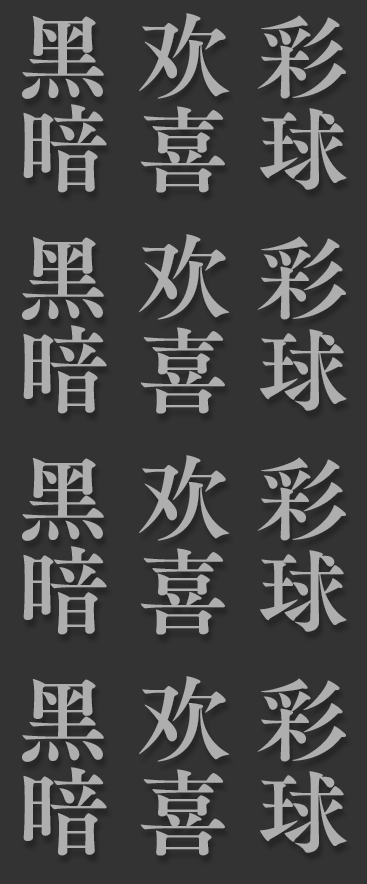
<style>
.page{position:relative;width:367px;height:884px;background:#333333}
.page>*{position:absolute;margin:0}
.t1{font:93px "FZFW-ZhuZiAOldMin-B--GB1-0";color:#aeaeae}
.t2{font:94.4px "FZFW-ZhuZiAOldMin-B--GB1-0";color:#aeaeae}
.t3{font:91.1px "FZFW-ZhuZiAOldMin-B--GB1-0";color:#aeaeae}
</style>
<div class="page">
<p class="t1" style="left:22px;top:16px;width:85px;height:177px">黑暗</p>
<p class="t2" style="left:139px;top:13px;width:91px;height:180px">欢喜</p>
<p class="t3" style="left:257px;top:15px;width:90px;height:175px">彩球</p>
<p class="t1" style="left:22px;top:237px;width:85px;height:177px">黑暗</p>
<p class="t2" style="left:139px;top:234px;width:91px;height:180px">欢喜</p>
<p class="t3" style="left:257px;top:236px;width:90px;height:175px">彩球</p>
<p class="t1" style="left:22px;top:458px;width:85px;height:177px">黑暗</p>
<p class="t2" style="left:139px;top:455px;width:91px;height:180px">欢喜</p>
<p class="t3" style="left:257px;top:457px;width:90px;height:175px">彩球</p>
<p class="t2" style="left:139px;top:676px;width:91px;height:180px">欢喜</p>
<p class="t3" style="left:257px;top:678px;width:90px;height:175px">彩球</p>
<p class="t1" style="left:22px;top:679px;width:85px;height:177px">黑暗</p>
</div>
